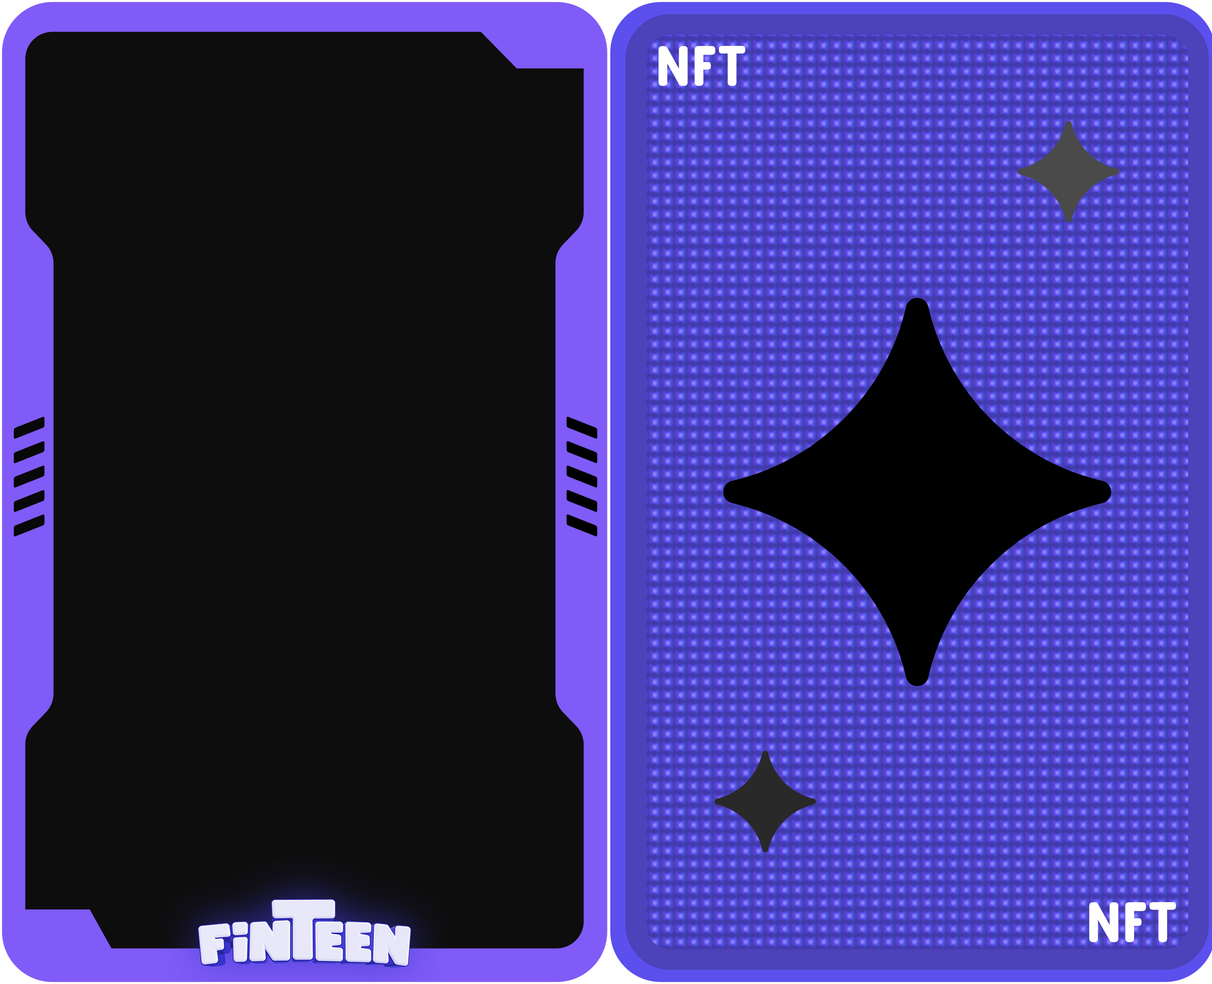
<style>
.page{position:relative;width:1212px;height:984px;background:#0e0d0d}
.page>*{position:absolute;margin:0}
.t1{font:56.9px "FredokaCondensed-SemiBold";letter-spacing:0.02em;color:#ffffff;text-transform:uppercase}
</style>
<div class="page">
<p class="t1" style="left:659px;top:46px;width:87px;height:40px">NFT</p>
<p class="t1" style="left:1089px;top:902px;width:87px;height:40px">NFT</p>
</div>
